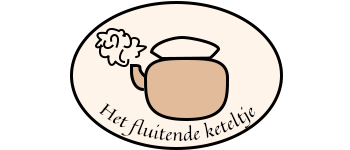
<style>
.page{position:relative;width:350px;height:150px;background:#ffffff}
.page>*{position:absolute;margin:0}
.t1{font:17px "Quintessential-Regular";color:#000000}
</style>
<div class="page">
<p class="t1" style="left:99px;top:103px;width:157px;height:39px">Het fluitende keteltje</p>
</div>
